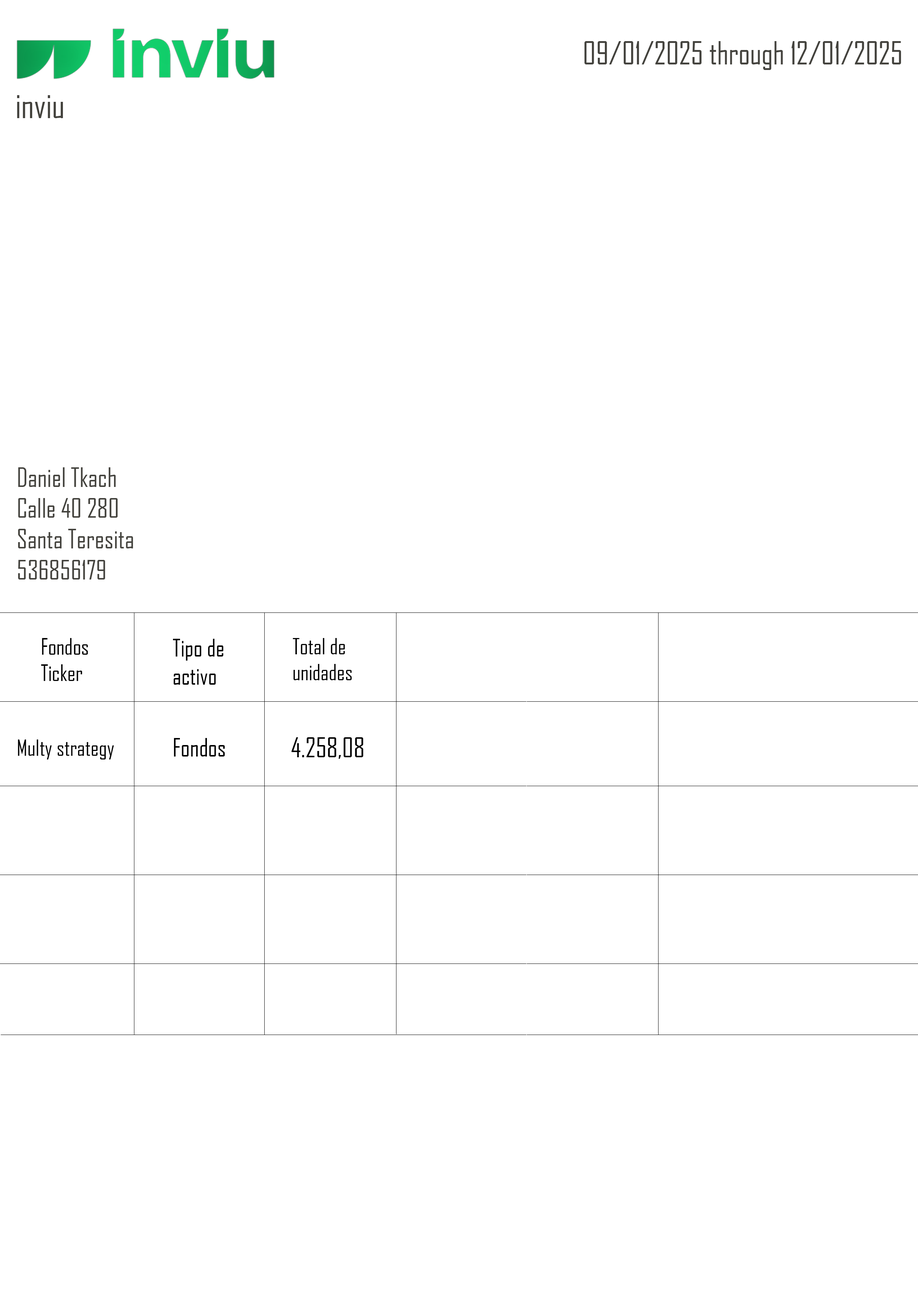
<style>
.page{position:relative;width:918px;height:1299px;background:#ffffff}
.page>*{position:absolute;margin:0}
.t1{font:30.3px "AgencyFB-Reg";color:#44433e}
.t2{font:34px "AgencyFB-Reg";color:#44433e}
.t3{font:25.7px "AgencyFB-Reg";color:#44433e}
.t4{font:21.9px "AgencyFB-Reg";color:#000000}
.t5{font:23.4px "AgencyFB-Reg";color:#000000}
.t6{font:21.6px "AgencyFB-Reg";color:#000000}
.t7{font:24.2px "AgencyFB-Reg";color:#000000}
.t8{font:26.3px "AgencyFB-Reg";color:#000000}
</style>
<div class="page">
<p class="t1" style="left:585px;top:41px;width:316px;height:29px">09/01/2025 through 12/01/2025</p>
<p class="t2" style="left:17px;top:95px;width:46px;height:23px">inviu</p>
<p class="t3" style="left:18px;top:467px;width:115px;height:112px">Daniel Tkach<br>Calle 40 280 <br>Santa Teresita<br>536856179</p>
<p class="t4" style="left:41px;top:638px;width:47px;height:43px">Fondos<br>Ticker</p>
<p class="t5" style="left:173px;top:639px;width:51px;height:46px">Tipo de <br>activo</p>
<p class="t6" style="left:293px;top:638px;width:59px;height:42px">Total de <br>unidades</p>
<p class="t7" style="left:174px;top:738px;width:51px;height:18px">Fondos</p>
<p class="t8" style="left:291px;top:737px;width:73px;height:22px">4.258,08</p>
<p class="t6" style="left:18px;top:739px;width:96px;height:20px">Multy strategy</p>
</div>
